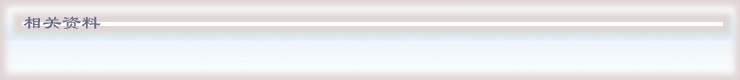
<style>
.page{position:relative;width:740px;height:80px}
.page>*{position:absolute;margin:0}
.t1{font:19.4px "LiSu";color:#686d87}
</style>
<div class="page">
<p class="t1" style="left:23px;top:16px;width:78px;height:13px">相关资料</p>
</div>
